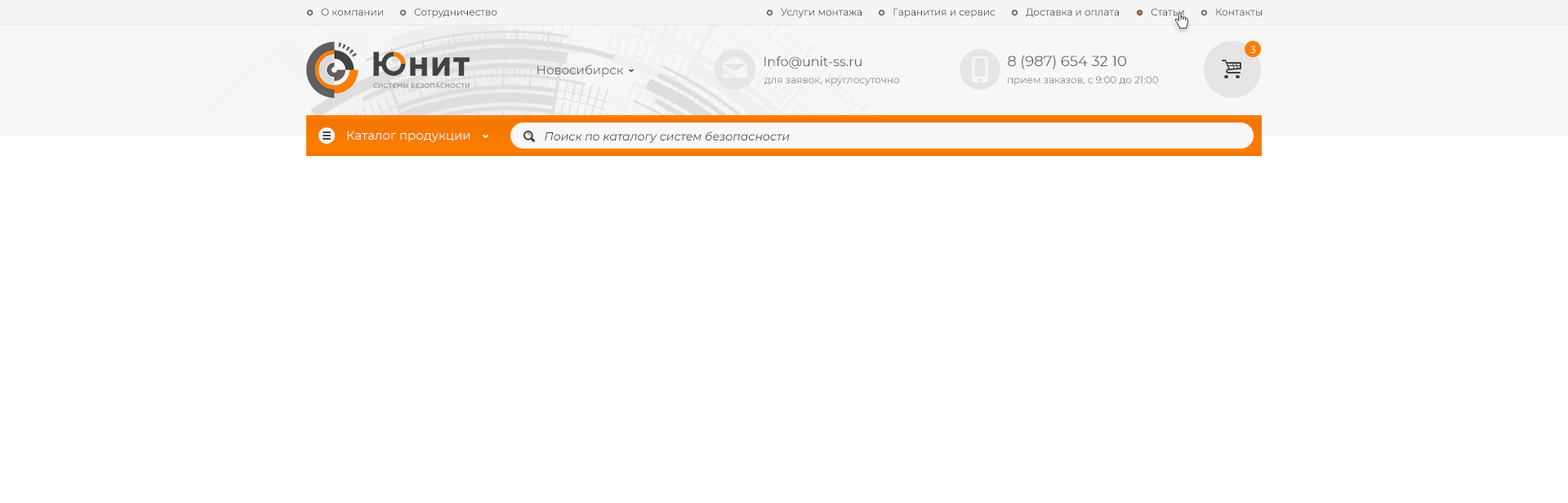
<style>
.page{position:relative;width:1568px;height:503px;background:#ffffff}
.page>*{position:absolute;margin:0}
.t1{font:9.8px "Montserrat-Regular";color:#404040}
.t2{font:9.8px "Montserrat-Regular"}
.t3{font:9.8px "Montserrat-Regular";color:#ffffff}
.t4{font:12.2px "Montserrat-Regular";color:#606060}
.t5{font:13.1px "Montserrat-Regular";color:#606060}
.t6{font:14.7px "Montserrat-Regular";color:#606060}
.t7{font:9.8px "Montserrat-Regular";color:#808080}
.t8{font:12.2px "Montserrat-Regular";color:#f7f7f7}
.t9{font:11.4px "Montserrat-Italic";color:#404040}
</style>
<div class="page">
<p class="t1" style="left:321px;top:8px;width:62px;height:8px">О компании</p>
<p class="t1" style="left:414px;top:8px;width:83px;height:10px">Сотрудничество</p>
<p class="t1" style="left:781px;top:8px;width:81px;height:10px">Услуги монтажа</p>
<p class="t1" style="left:893px;top:8px;width:103px;height:10px">Гаранития и сервис</p>
<p class="t1" style="left:1026px;top:8px;width:93px;height:9px">Доставка и оплата</p>
<p class="t1" style="left:1151px;top:8px;width:33px;height:8px">Статьи</p>
<p class="t2" style="left:1216px;top:8px;width:47px;height:8px">Контакты</p>
<p class="t3" style="left:1250px;top:46px;width:6px;height:7px">3</p>
<p class="t4" style="left:537px;top:65px;width:87px;height:12px">Новосибирск</p>
<p class="t5" style="left:764px;top:56px;width:98px;height:13px">Info@unit-ss.ru</p>
<p class="t6" style="left:1008px;top:55px;width:118px;height:14px">8 (987) 654 32 10</p>
<p class="t7" style="left:764px;top:78px;width:135px;height:8px">для заявок, круглосуточно</p>
<p class="t7" style="left:1008px;top:76px;width:150px;height:10px">прием заказов, с 9:00 до 21:00</p>
<p class="t8" style="left:347px;top:131px;width:123px;height:11px">Каталог продукции</p>
<p class="t9" style="left:545px;top:131px;width:245px;height:12px">Поиск по каталогу систем безопасности</p>
</div>
